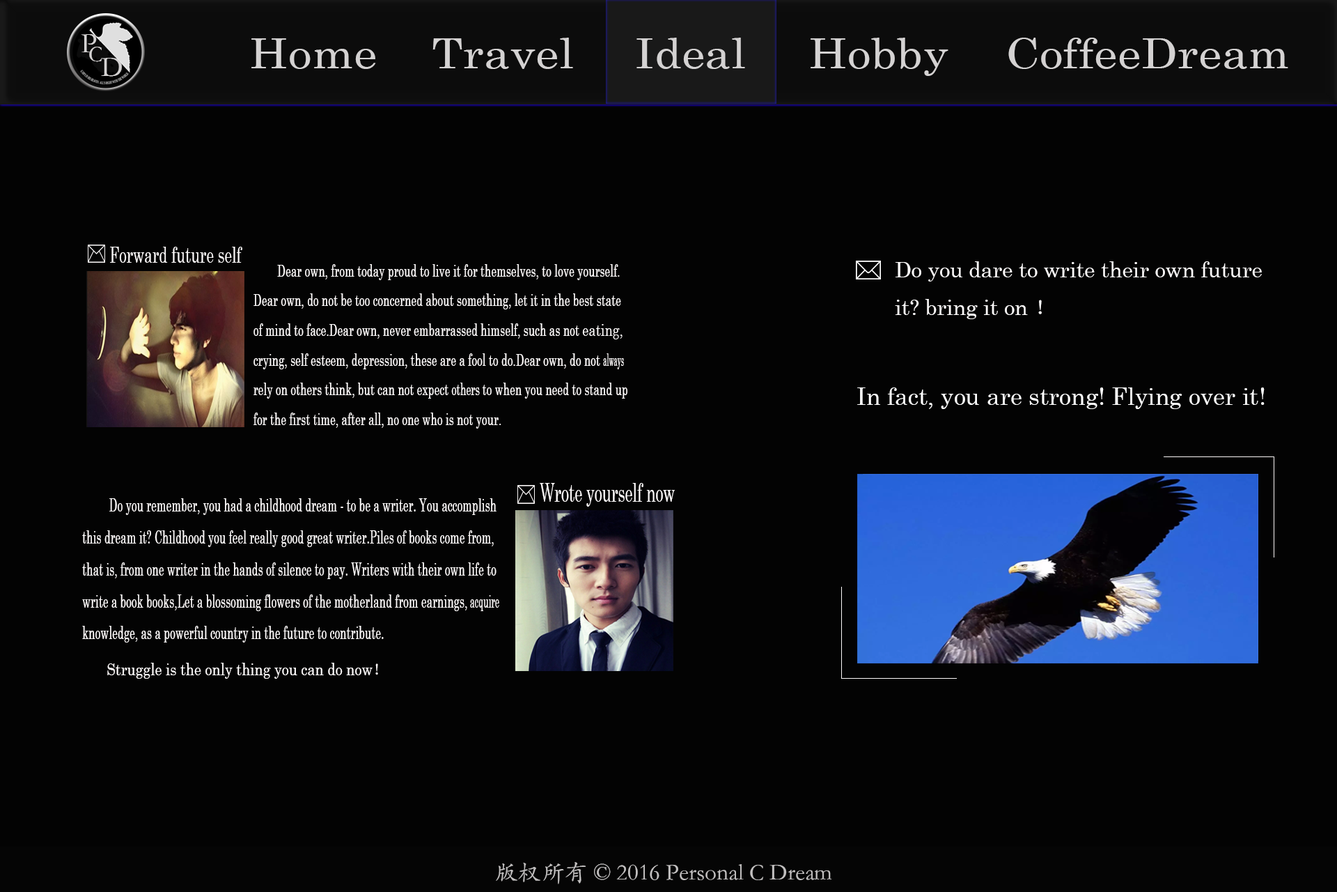
<style>
.page{position:relative;width:1337px;height:892px;background:#030303}
.page>*{position:absolute;margin:0}
.t1{font:28.8px "STKaiti";color:#d4d2d2}
.t2{font:41.6px "CenturySchoolbook";color:#d4d2d2;scale:1.13 1}
.t3{font:22.4px "STKaiti";color:#d4d2d2}
.t4{font:22.3px "CenturySchoolbook";color:#fbf8f8;scale:0.66 1}
.t5{font:17px "CenturySchoolbook";color:#fbf8f8;scale:0.63 1}
.t6{font:17px "CenturySchoolbook";color:#fbf8f8;scale:0.75 1}
.t7{font:17px "CenturySchoolbook";color:#fbf8f8;scale:0.38 1}
.t8{font:17px "CenturySchoolbook";color:#fbf8f8;scale:0.57 1}
.t9{font:21.3px "CenturySchoolbook";color:#fcfafa}
.t10{font:21.3px "SimSun";color:#fcfafa}
.t11{font:23.6px "CenturySchoolbook";color:#ffffff}
.t12{font:25.7px "CenturySchoolbook";color:#fbf8f8;scale:0.59 1}
.t13{font:18.2px "CenturySchoolbook";color:#fbf8f8;scale:0.59 1}
.t14{font:18.2px "CenturySchoolbook";color:#fbf8f8;scale:0.47 1}
.t15{font:16.4px "CenturySchoolbook";color:#fbf8f8;scale:0.85 1}
.t16{font:16.4px "SimSun";color:#fbf8f8;scale:0.85 1}
.t17{font:23.2px "STKaiti";color:#d4d2d2}
</style>
<div class="page">
<p class="t1" style="left:81px;top:34px;width:16px;height:19px">P</p>
<p class="t2" style="left:251px;top:38px;width:125px;height:31px">Home</p>
<p class="t2" style="left:433px;top:38px;width:140px;height:31px">Travel</p>
<p class="t2" style="left:637px;top:38px;width:108px;height:31px">Ideal</p>
<p class="t2" style="left:811px;top:38px;width:138px;height:38px">Hobby</p>
<p class="t2" style="left:1009px;top:38px;width:280px;height:31px">CoffeeDream</p>
<p class="t3" style="left:89px;top:47px;width:13px;height:15px">C</p>
<p class="t1" style="left:101px;top:58px;width:21px;height:19px">D</p>
<p class="t4" style="left:110px;top:247px;width:132px;height:16px">Forward future self</p>
<p class="t5" style="left:254px;top:264px;width:374px;height:164px">Dear own, from today proud to live it for themselves, to love yourself. <br>Dear own, do not be too concerned about something, let it in the best state <br>of mind to face.Dear own, never embarrassed himself, such as not <span class="t6">eating, <br></span>crying, self esteem, depression, these are a fool to do.Dear own, do not <span class="t7">always <br></span>rely on others think, but can not expect <span class="t8">others </span>to when you need to stand up <br>for the first time, after all, no one who is not your.</p>
<p class="t9" style="left:895px;top:261px;width:367px;height:58px">Do you dare to write their own future <br>it? bring it on <span class="t10">！</span></p>
<p class="t11" style="left:857px;top:387px;width:408px;height:22px">In fact, you are strong! Flying over it!</p>
<p class="t12" style="left:540px;top:483px;width:135px;height:23px">Wrote yourself now</p>
<p class="t13" style="left:82px;top:498px;width:417px;height:144px">Do you remember, you had a childhood dream - to be a writer. You accomplish <br>this dream it? Childhood you feel really good great writer.Piles of books come from, <br>that is, from one writer in the hands of silence to pay. Writers with their own life to <br>write a book books,Let a blossoming flowers of the motherland from earnings,<span class="t14"> acquire <br></span>knowledge, as a powerful country in the future to contribute.</p>
<p class="t15" style="left:107px;top:662px;width:271px;height:16px">Struggle is the only thing you can do now<span class="t16">！</span></p>
<p class="t17" style="left:496px;top:862px;width:336px;height:22px">版权所有 © 2016 Personal C Dream</p>
</div>
